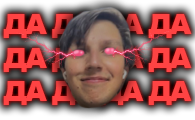
<style>
.page{position:relative;width:195px;height:120px}
.page>*{position:absolute;margin:0}
.t1{font:28px "Arial-Black";letter-spacing:-0.075em}
</style>
<div class="page">
<p class="t1" style="left:3px;top:14px;width:189px;height:91px;text-align:center">ДА ДА ДА ДА<br>ДА ДА ДА ДА<br>ДА ДА ДА ДА</p>
</div>
